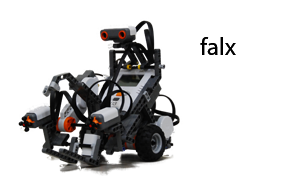
<style>
.page{position:relative;width:283px;height:190px;background:#ffffff}
.page>*{position:absolute;margin:0}
.t1{font:24.4px "MyriadPro-Regular";color:#000000}
</style>
<div class="page">
<p class="t1" style="left:200px;top:37px;width:36px;height:18px">falx</p>
</div>
